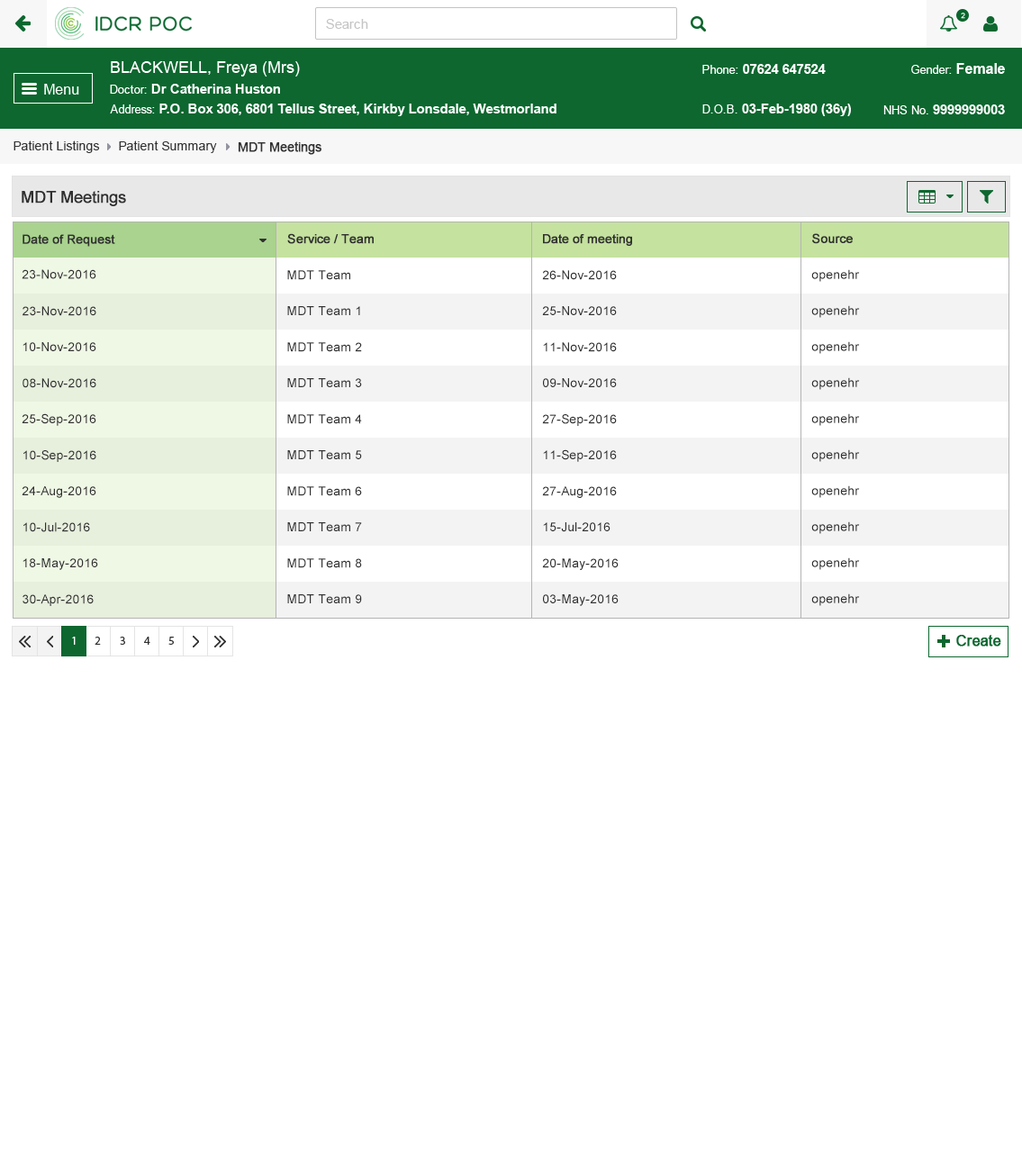
<style>
.page{position:relative;width:1022px;height:1167px;background:#ffffff}
.page>*{position:absolute;margin:0}
.t1{font:12.6px "ArialMT";color:#313131}
.t2{font:12.6px "ArialMT";color:#313131;font-weight:bold}
.t3{font:16.2px "ArialMT";color:#303030;font-weight:bold}
.t4{font:12.6px "ArialMT";color:#303030;font-weight:bold}
.t5{font:12.6px "ArialMT";color:#303030}
</style>
<div class="page">
<p class="t1" style="left:14px;top:140px;width:86px;height:13px">Patient Listings</p>
<p class="t1" style="left:119px;top:140px;width:98px;height:13px">Patient Summary</p>
<p class="t2" style="left:238px;top:141px;width:83px;height:14px">MDT Meetings</p>
<p class="t3" style="left:22px;top:191px;width:104px;height:15px">MDT Meetings</p>
<p class="t4" style="left:287px;top:233px;width:87px;height:11px">Service / Team</p>
<p class="t4" style="left:812px;top:233px;width:41px;height:11px">Source</p>
<p class="t4" style="left:23px;top:234px;width:92px;height:13px">Date of Request</p>
<p class="t4" style="left:543px;top:234px;width:89px;height:12px">Date of meeting</p>
<p class="t5" style="left:22px;top:269px;width:74px;height:10px">23-Nov-2016</p>
<p class="t5" style="left:811px;top:269px;width:49px;height:13px">openehr</p>
<p class="t5" style="left:287px;top:270px;width:63px;height:10px">MDT Team</p>
<p class="t5" style="left:542px;top:270px;width:75px;height:10px">26-Nov-2016</p>
<p class="t5" style="left:811px;top:305px;width:49px;height:13px">openehr</p>
<p class="t5" style="left:23px;top:306px;width:73px;height:10px">23-Nov-2016</p>
<p class="t5" style="left:287px;top:306px;width:73px;height:9px">MDT Team 1</p>
<p class="t5" style="left:542px;top:306px;width:75px;height:9px">25-Nov-2016</p>
<p class="t5" style="left:811px;top:341px;width:49px;height:13px">openehr</p>
<p class="t5" style="left:23px;top:342px;width:73px;height:9px">10-Nov-2016</p>
<p class="t5" style="left:287px;top:342px;width:75px;height:10px">MDT Team 2</p>
<p class="t5" style="left:543px;top:342px;width:74px;height:10px">11-Nov-2016</p>
<p class="t5" style="left:811px;top:377px;width:49px;height:13px">openehr</p>
<p class="t5" style="left:23px;top:378px;width:73px;height:10px">08-Nov-2016</p>
<p class="t5" style="left:287px;top:378px;width:75px;height:9px">MDT Team 3</p>
<p class="t5" style="left:543px;top:378px;width:74px;height:9px">09-Nov-2016</p>
<p class="t5" style="left:22px;top:413px;width:74px;height:13px">25-Sep-2016</p>
<p class="t5" style="left:811px;top:413px;width:49px;height:13px">openehr</p>
<p class="t5" style="left:287px;top:414px;width:75px;height:10px">MDT Team 4</p>
<p class="t5" style="left:542px;top:414px;width:75px;height:12px">27-Sep-2016</p>
<p class="t5" style="left:543px;top:449px;width:74px;height:13px">11-Sep-2016</p>
<p class="t5" style="left:811px;top:449px;width:49px;height:13px">openehr</p>
<p class="t5" style="left:23px;top:450px;width:73px;height:12px">10-Sep-2016</p>
<p class="t5" style="left:287px;top:450px;width:75px;height:9px">MDT Team 5</p>
<p class="t5" style="left:811px;top:485px;width:49px;height:13px">openehr</p>
<p class="t5" style="left:22px;top:486px;width:74px;height:12px">24-Aug-2016</p>
<p class="t5" style="left:287px;top:486px;width:75px;height:10px">MDT Team 6</p>
<p class="t5" style="left:542px;top:486px;width:75px;height:12px">27-Aug-2016</p>
<p class="t5" style="left:811px;top:521px;width:49px;height:13px">openehr</p>
<p class="t5" style="left:23px;top:522px;width:67px;height:10px">10-Jul-2016</p>
<p class="t5" style="left:287px;top:522px;width:75px;height:9px">MDT Team 7</p>
<p class="t5" style="left:543px;top:522px;width:67px;height:10px">15-Jul-2016</p>
<p class="t5" style="left:811px;top:557px;width:49px;height:13px">openehr</p>
<p class="t5" style="left:23px;top:558px;width:75px;height:12px">18-May-2016</p>
<p class="t5" style="left:287px;top:558px;width:75px;height:10px">MDT Team 8</p>
<p class="t5" style="left:542px;top:558px;width:77px;height:12px">20-May-2016</p>
<p class="t5" style="left:811px;top:593px;width:49px;height:13px">openehr</p>
<p class="t5" style="left:23px;top:594px;width:71px;height:12px">30-Apr-2016</p>
<p class="t5" style="left:287px;top:594px;width:75px;height:9px">MDT Team 9</p>
<p class="t5" style="left:543px;top:594px;width:76px;height:12px">03-May-2016</p>
</div>
